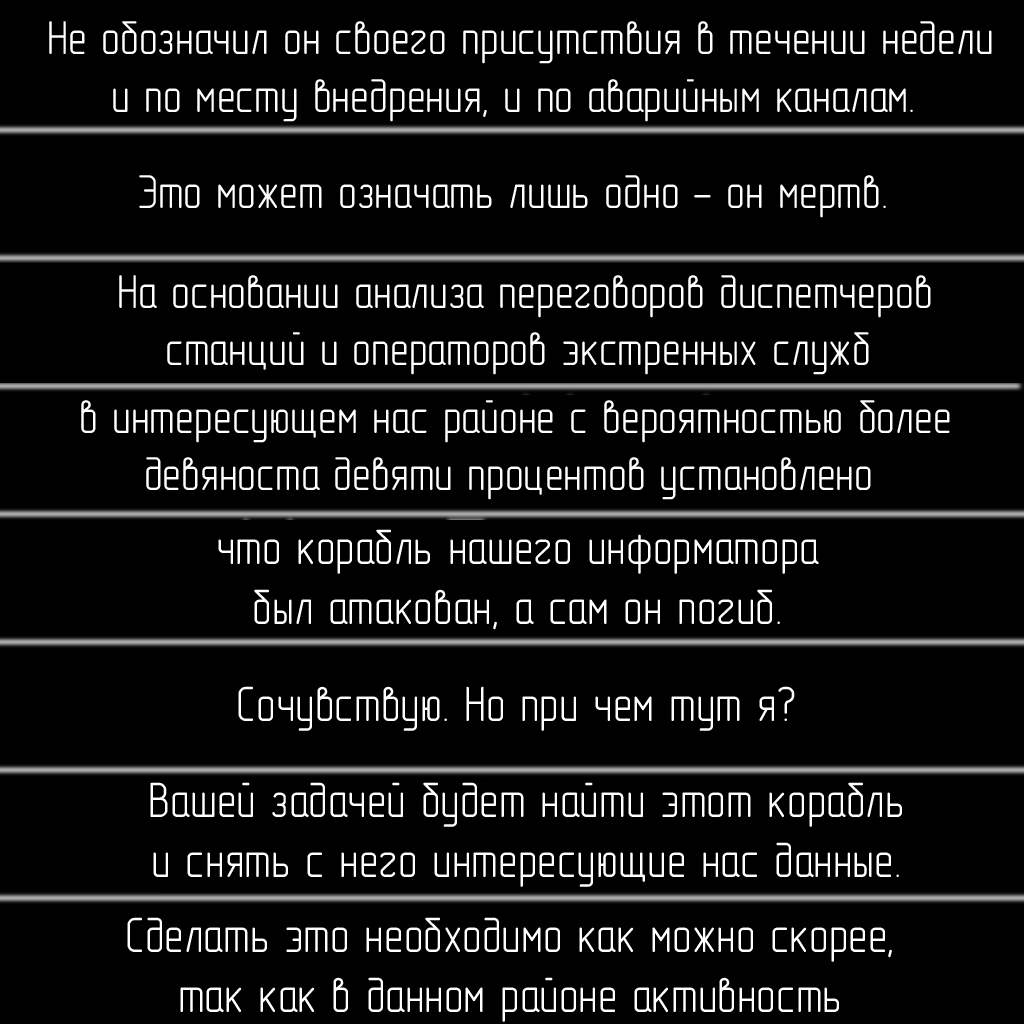
<style>
.page{position:relative;width:1024px;height:1024px;background:#000000}
.page>*{position:absolute;margin:0}
.t1{font:48px "GOST-2.304-81typeA";color:#ffffff}
.t2{font:50px "GOST-2.304-81typeA";color:#ffffff}
</style>
<div class="page">
<p class="t1" style="left:49px;top:21px;width:943px;height:101px;text-align:center">Не обозначил он своего присутствия в течении недели<br>и по месту внедрения, и по аварийным каналам.</p>
<p class="t1" style="left:139px;top:175px;width:747px;height:43px">Это может означать лишь одно - он мертв.</p>
<p class="t1" style="left:119px;top:275px;width:812px;height:100px;text-align:center">На основании анализа переговоров диспетчеров<br>станций и операторов экстренных служб</p>
<p class="t1" style="left:81px;top:400px;width:869px;height:100px;text-align:center">в интересующем нас районе с вероятностью более<br>девяноста девяти процентов установлено</p>
<p class="t2" style="left:218px;top:529px;width:601px;height:101px;text-align:center">что корабль нашего информатора<br>был атакован, а сам он погиб.</p>
<p class="t2" style="left:238px;top:686px;width:557px;height:45px">Сочувствую. Но при чем тут я?</p>
<p class="t2" style="left:150px;top:782px;width:752px;height:105px;text-align:center">Вашей задачей будет найти этот корабль<br>и снять с него интересующие нас данные.</p>
<p class="t2" style="left:127px;top:917px;width:765px;height:105px;text-align:center">Сделать это необходимо как можно скорее,<br>так как в данном районе активность</p>
</div>
